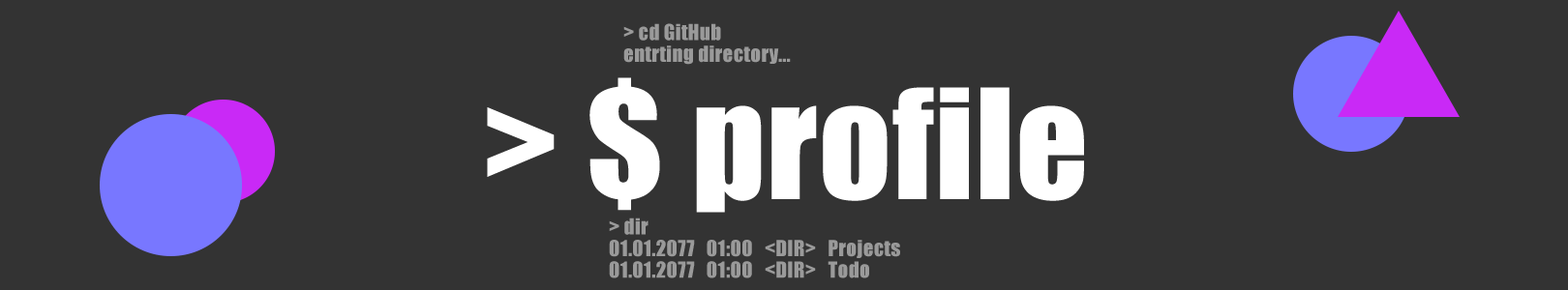
<style>
.page{position:relative;width:1568px;height:290px;background:#333333}
.page>*{position:absolute;margin:0}
.t1{font:20.6px/38.7px "Impact";letter-spacing:0.012em;color:#9a9a9a}
.t2{font:141.1px "Impact";letter-spacing:0.012em;color:#ffffff}
</style>
<div class="page">
<p class="t1" style="left:623px;top:23px;width:168px;height:42px">&gt; cd GitHub<br>entrting directory...</p>
<p class="t2" style="left:487px;top:77px;width:597px;height:136px">&gt; $ profile</p>
<p class="t1" style="left:609px;top:218px;width:291px;height:61px">&gt; dir<br>01.01.2077   01:00   &lt;DIR&gt;   Projects<br>01.01.2077   01:00   &lt;DIR&gt;   Todo</p>
</div>
